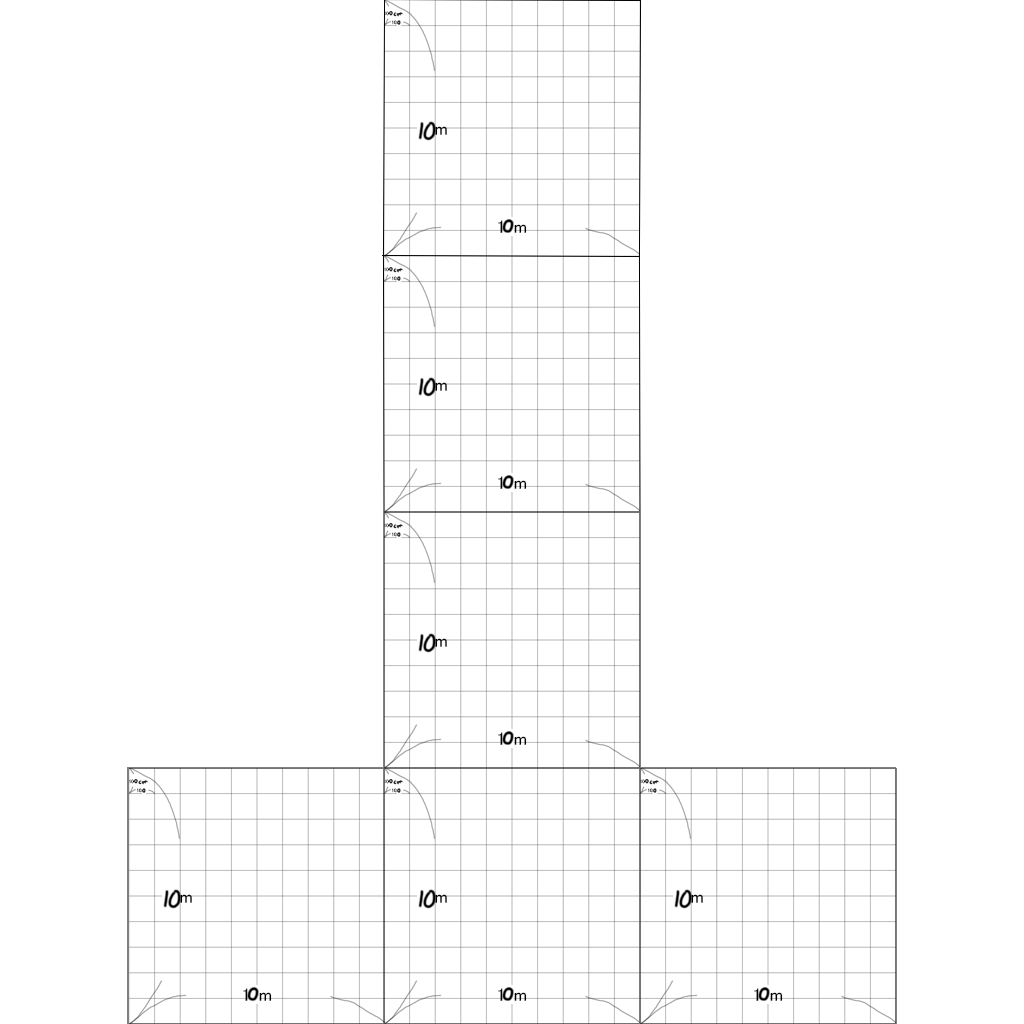
<style>
.page{position:relative;width:1024px;height:1024px;background:#ffffff}
.page>*{position:absolute;margin:0}
.t1{font:4.5px "MS-PGothic";color:#000000}
.t2{font:4.5px "MS-PGothic"}
.t3{font:18px "MS-PGothic"}
.t4{font:18px "MS-PGothic";color:#000000}
</style>
<div class="page">
<p class="t1" style="left:384px;top:11px;width:8px;height:5px">10m</p>
<p class="t2" style="left:392px;top:20px;width:8px;height:5px">10m</p>
<p class="t3" style="left:419px;top:122px;width:28px;height:13px">1km</p>
<p class="t4" style="left:498px;top:220px;width:29px;height:13px">1km</p>
<p class="t1" style="left:384px;top:267px;width:8px;height:5px">10m</p>
<p class="t2" style="left:392px;top:276px;width:8px;height:5px">10m</p>
<p class="t3" style="left:419px;top:378px;width:28px;height:13px">1km</p>
<p class="t4" style="left:498px;top:476px;width:29px;height:13px">1km</p>
<p class="t1" style="left:384px;top:523px;width:8px;height:5px">10m</p>
<p class="t2" style="left:392px;top:532px;width:8px;height:5px">10m</p>
<p class="t3" style="left:419px;top:634px;width:28px;height:13px">1km</p>
<p class="t4" style="left:498px;top:732px;width:29px;height:13px">1km</p>
<p class="t1" style="left:129px;top:779px;width:8px;height:5px">10m</p>
<p class="t1" style="left:384px;top:779px;width:8px;height:5px">10m</p>
<p class="t1" style="left:640px;top:779px;width:8px;height:5px">10m</p>
<p class="t2" style="left:137px;top:788px;width:8px;height:5px">10m</p>
<p class="t2" style="left:392px;top:788px;width:8px;height:5px">10m</p>
<p class="t2" style="left:648px;top:788px;width:8px;height:5px">10m</p>
<p class="t3" style="left:164px;top:890px;width:28px;height:13px">1km</p>
<p class="t3" style="left:419px;top:890px;width:28px;height:13px">1km</p>
<p class="t3" style="left:675px;top:890px;width:28px;height:13px">1km</p>
<p class="t4" style="left:243px;top:988px;width:29px;height:13px">1km</p>
<p class="t4" style="left:498px;top:988px;width:29px;height:13px">1km</p>
<p class="t4" style="left:754px;top:988px;width:29px;height:13px">1km</p>
</div>
